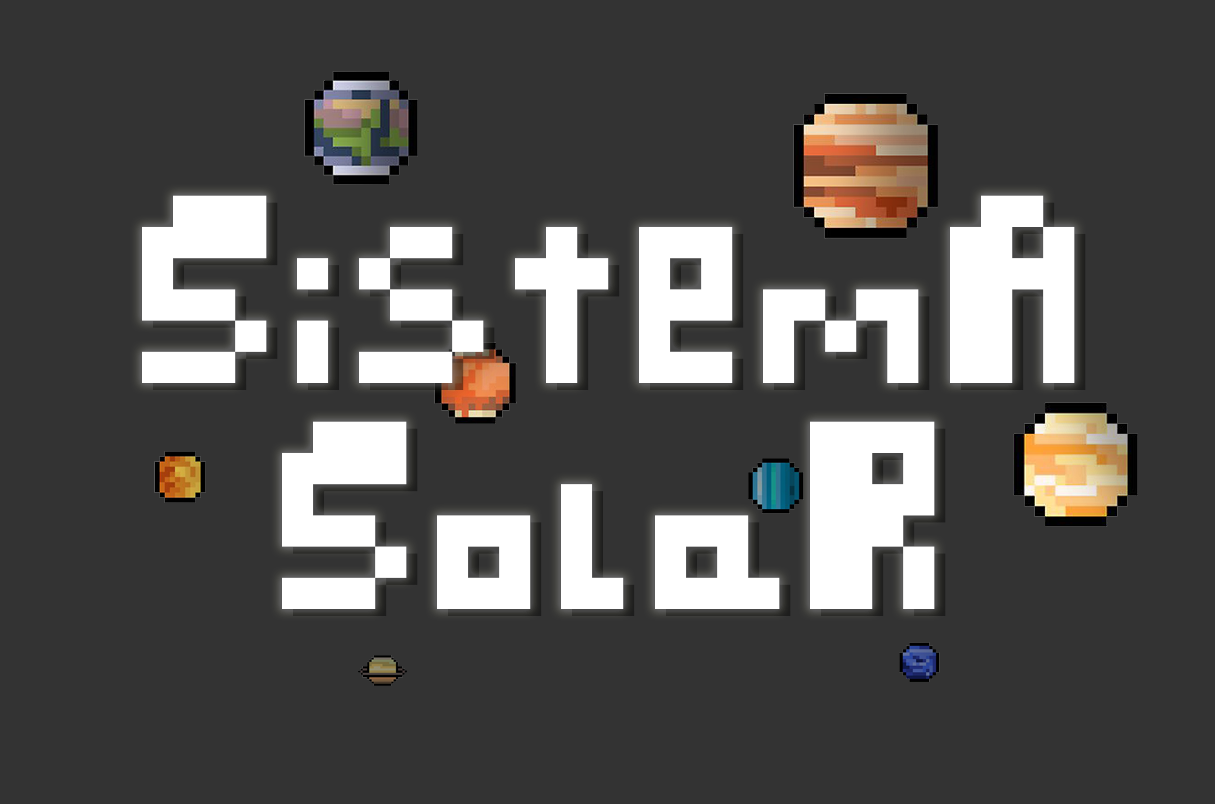
<style>
.page{position:relative;width:1215px;height:804px;background:#333333}
.page>*{position:absolute;margin:0}
.t1{font:218.6px/225.6px "retro-thing";color:#ffffff}
</style>
<div class="page">
<p class="t1" style="left:142px;top:195px;width:933px;height:414px;text-align:center">SistemA<br>SolaR</p>
</div>
